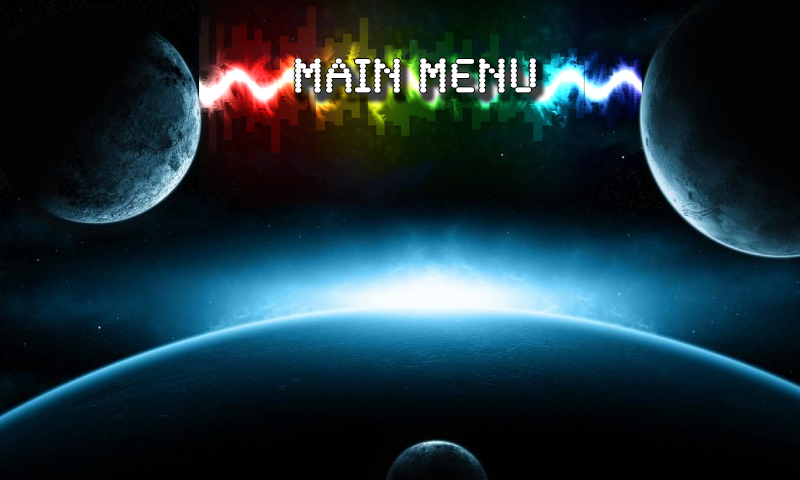
<style>
.page{position:relative;width:800px;height:480px}
.page>*{position:absolute;margin:0}
.t1{font:50px "SynchroLET";color:#ffffff}
</style>
<div class="page">
<p class="t1" style="left:295px;top:58px;width:241px;height:35px">MAIN MENU</p>
</div>
